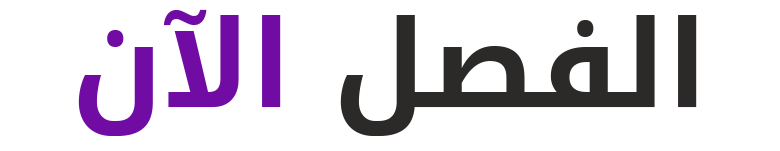
<style>
.page{position:relative;width:780px;height:151px;background:#ffffff}
.page>*{position:absolute;margin:0}
.t1{font:121px "DroidArabicKufi-Bold";color:#2c2929}
.t2{font:121px "DroidArabicKufi-Bold";color:#700ca3}
</style>
<div class="page">
<p class="t1" style="left:78px;top:9px;width:619px;height:127px">الفصل <span class="t2">الآن</span></p>
</div>
